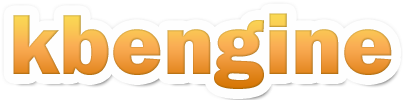
<style>
.page{position:relative;width:405px;height:100px;background:#fefefe}
.page>*{position:absolute;margin:0}
.t1{font:88px "FranklinGothic-Heavy"}
</style>
<div class="page">
<p class="t1" style="left:13px;top:13px;width:379px;height:76px">kbengine</p>
</div>
